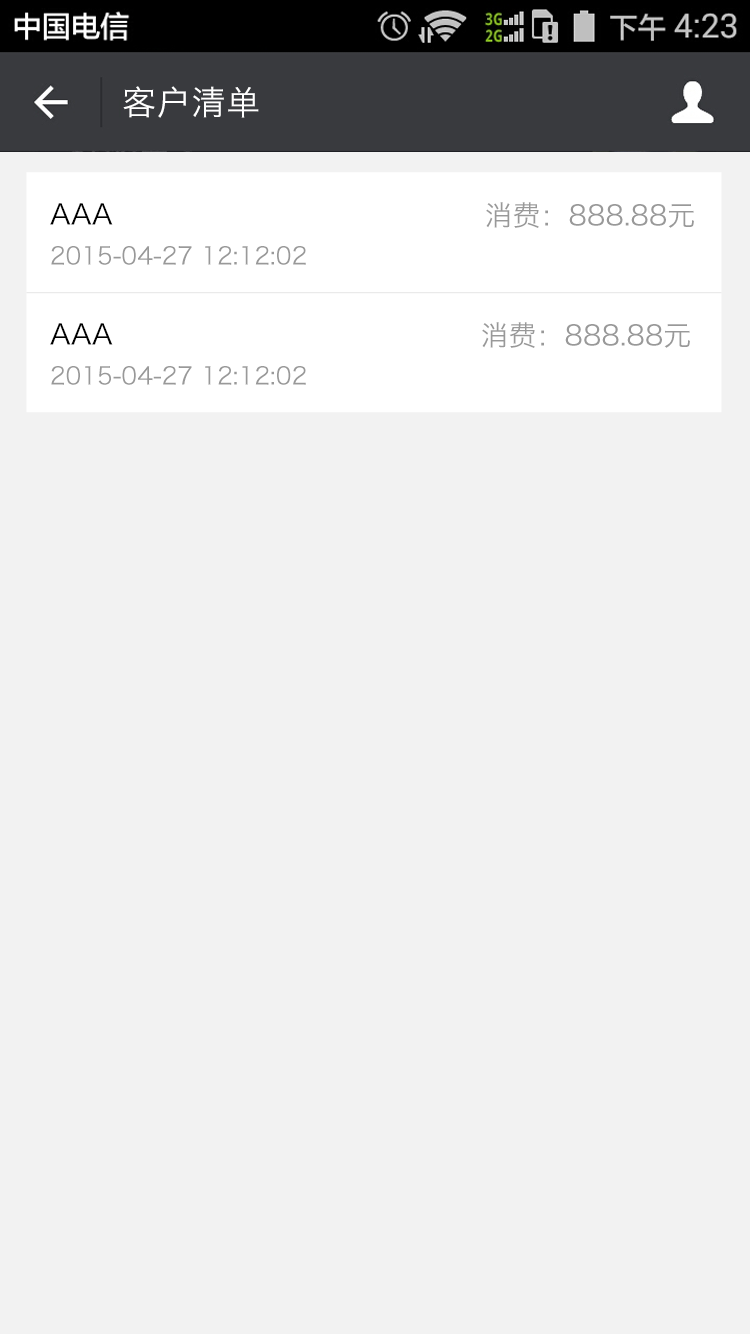
<style>
.page{position:relative;width:750px;height:1334px;background:#f2f2f2}
.page>*{position:absolute;margin:0}
.t1{font:34px "HiraginoSansGB-W3";letter-spacing:0.022em;color:#ffffff}
.t2{font:28px "HiraginoSansGB-W3";color:#000000}
.t3{font:28px "HiraginoSansGB-W3";color:#999999}
.t4{font:24px "HiraginoSansGB-W3";color:#999999}
</style>
<div class="page">
<p class="t1" style="left:123px;top:86px;width:136px;height:32px">客户清单</p>
<p class="t2" style="left:50px;top:203px;width:63px;height:22px">AAA</p>
<p class="t3" style="left:486px;top:202px;width:208px;height:26px">消费：888.88元</p>
<p class="t4" style="left:51px;top:246px;width:255px;height:19px">2015-04-27 12:12:02</p>
<p class="t2" style="left:50px;top:323px;width:63px;height:22px">AAA</p>
<p class="t3" style="left:482px;top:322px;width:208px;height:26px">消费：888.88元</p>
<p class="t4" style="left:51px;top:366px;width:255px;height:19px">2015-04-27 12:12:02</p>
</div>
